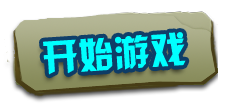
<style>
.page{position:relative;width:232px;height:106px;background:#ffffff}
.page>*{position:absolute;margin:0}
.t1{font:36px "HYk2gj";color:#00ffff}
</style>
<div class="page">
<p class="t1" style="left:43px;top:32px;width:143px;height:43px;rotate:-4deg">开始游戏</p>
</div>
